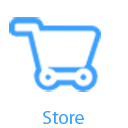
<style>
.page{position:relative;width:128px;height:128px;background:#ffffff}
.page>*{position:absolute;margin:0}
.t1{font:19.2px "MyriadPro-Regular";color:#3ca0ff}
</style>
<div class="page">
<p class="t1" style="left:43px;top:111px;width:41px;height:13px">Store</p>
</div>
